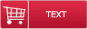
<style>
.page{position:relative;width:87px;height:29px}
.page>*{position:absolute;margin:0}
.t1{font:8px "Verdana";color:#ffffff}
</style>
<div class="page">
<p class="t1" style="left:45px;top:11px;width:22px;height:7px">TEXT</p>
</div>
